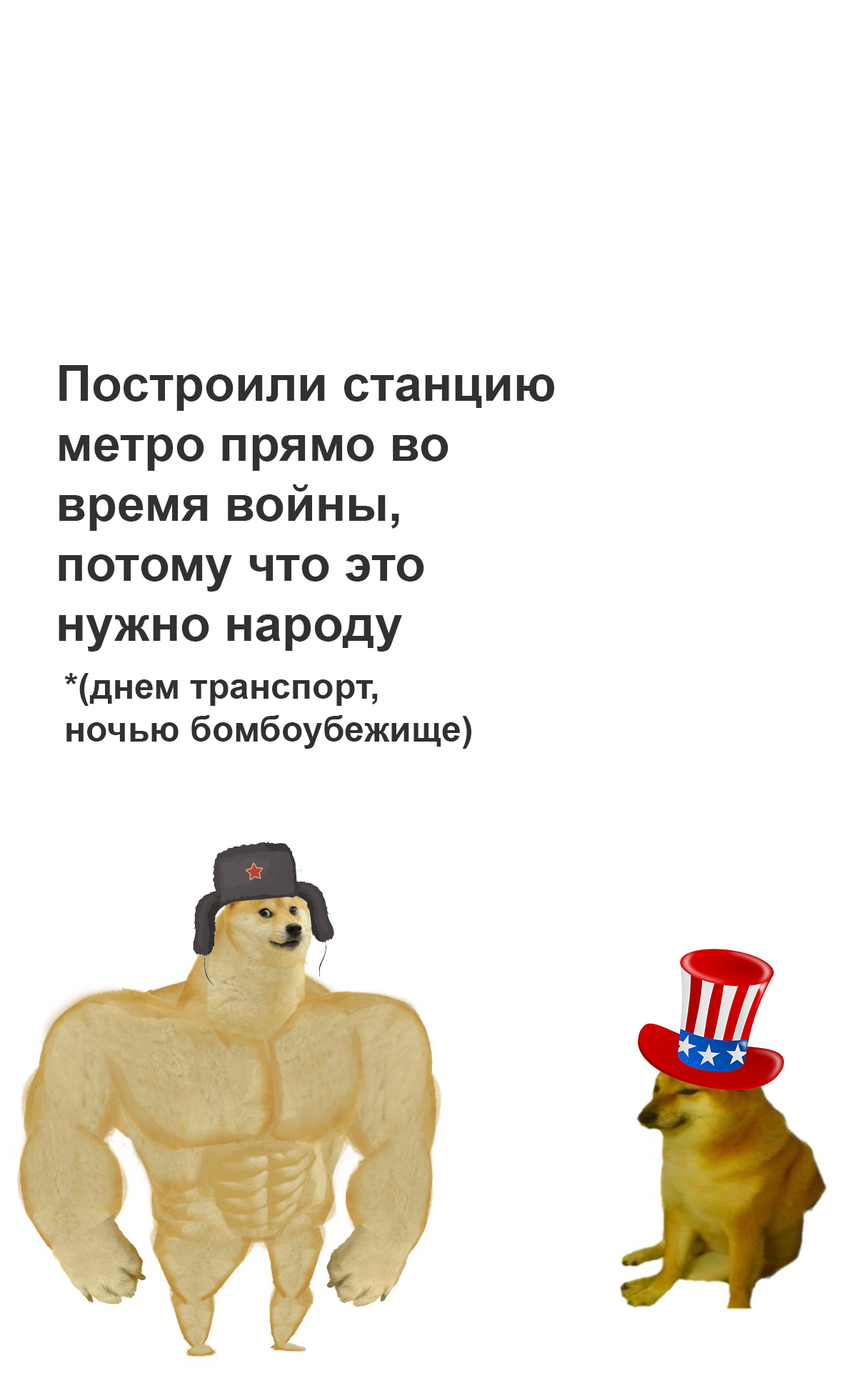
<style>
.page{position:relative;width:857px;height:1391px;background:#ffffff}
.page>*{position:absolute;margin:0}
.t1{font:50px "Arial-BoldMT";color:#32312f}
.t2{font:35.7px "Arial-BoldMT";color:#32312f}
</style>
<div class="page">
<p class="t1" style="left:59px;top:365px;width:495px;height:287px">Построили станцию<br>метро прямо во<br>время войны, <br>потому что это <br>нужно народу</p>
<p class="t2" style="left:64px;top:673px;width:408px;height:76px">*(днем транспорт,<br>ночью бомбоубежище)</p>
</div>
